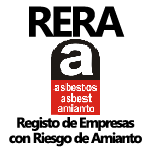
<style>
.page{position:relative;width:150px;height:150px;background:#ffffff}
.page>*{position:absolute;margin:0}
.t1{font:42.7px "SegoeUI-Bold";letter-spacing:-0.075em;color:#000000}
.t2{font:14.2px "SegoeUI-Bold";letter-spacing:-0.075em;color:#000000}
</style>
<div class="page">
<p class="t1" style="left:29px;top:6px;width:96px;height:31px">RERA</p>
<p class="t2" style="left:17px;top:117px;width:118px;height:14px">Registo de Empresas</p>
<p class="t2" style="left:9px;top:132px;width:133px;height:15px">con Riesgo de Amianto</p>
</div>
